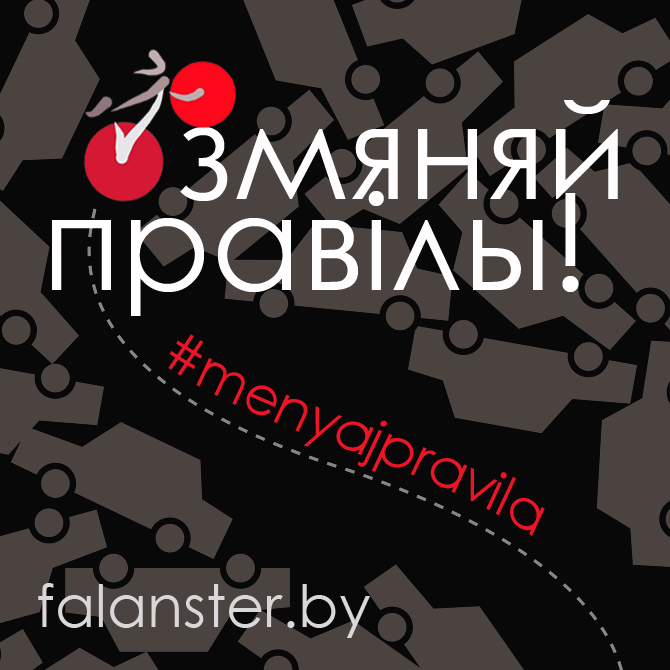
<style>
.page{position:relative;width:670px;height:670px;background:#080808}
.page>*{position:absolute;margin:0}
.t1{font:132px/91.3px "CenturyGothic";color:#fffefe}
.t2{font:53.9px "CenturyGothic";color:#f01526}
.t3{font:59px "CenturyGothic";color:#d9d7d7}
</style>
<div class="page">
<p class="t1" style="left:52px;top:100px;width:566px;height:216px;text-align:right">змяняй<br>правілы!</p>
<p class="t2" style="left:168px;top:334px;width:377px;height:202px;rotate:25deg">#menyajpravila</p>
<p class="t3" style="left:38px;top:583px;width:332px;height:55px">falanster.by</p>
</div>
